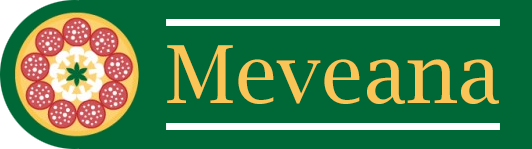
<style>
.page{position:relative;width:532px;height:149px;background:#006837}
.page>*{position:absolute;margin:0}
.t1{font:80px "LucidaBright";color:#fac457}
</style>
<div class="page">
<p class="t1" style="left:167px;top:45px;width:332px;height:59px">Meveana</p>
</div>
